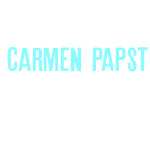
<style>
.page{position:relative;width:150px;height:150px;background:#ffffff}
.page>*{position:absolute;margin:0}
.t1{font:33.3px "Astoundingnews";color:#8afcff;scale:1.1 1}
</style>
<div class="page">
<p class="t1" style="left:7px;top:47px;width:141px;height:25px">Carmen Papst</p>
</div>
